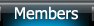
<style>
.page{position:relative;width:94px;height:26px}
.page>*{position:absolute;margin:0}
.t1{font:16px "Tahoma";color:#ffffff}
</style>
<div class="page">
<p class="t1" style="left:15px;top:6px;width:63px;height:14px">Members</p>
</div>
